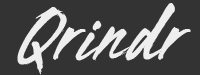
<style>
.page{position:relative;width:200px;height:75px;background:#333333}
.page>*{position:absolute;margin:0}
.t1{font:90px "SuperSonic";color:#eeeeee}
</style>
<div class="page">
<p class="t1" style="left:17px;top:3px;width:174px;height:72px">Qrindr</p>
</div>
